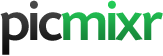
<style>
.page{position:relative;width:163px;height:56px;background:#ffffff}
.page>*{position:absolute;margin:0}
.t1{font:60px "TodaySHOP-Medium";letter-spacing:-0.025em;color:#2c2c2c}
.t2{font:60px "TodaySHOP-Medium";letter-spacing:-0.025em;color:#1ca245}
</style>
<div class="page">
<p class="t1" style="left:0px;top:0px;width:62px;height:55px">pic</p>
<p class="t2" style="left:61px;top:0px;width:102px;height:41px">mixr</p>
</div>
